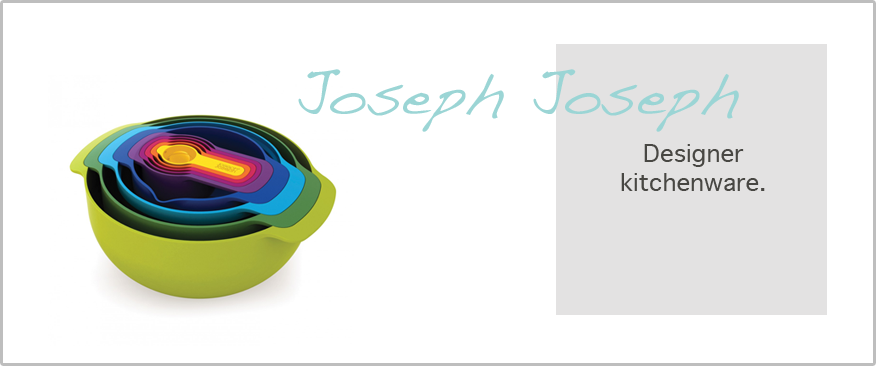
<style>
.page{position:relative;width:876px;height:366px;background:#ffffff}
.page>*{position:absolute;margin:0}
.t1{font:60px "Handwriting-Dakota";color:#9bd5d5}
.t2{font:24px "Geneva";color:#484743}
</style>
<div class="page">
<p class="t1" style="left:298px;top:69px;width:441px;height:63px;text-align:center">Joseph Joseph<br>joejkj</p>
<p class="t2" style="left:621px;top:144px;width:144px;height:47px;text-align:center">Designer <br>kitchenware.</p>
</div>
